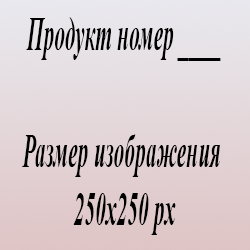
<style>
.page{position:relative;width:250px;height:250px}
.page>*{position:absolute;margin:0}
.t1{font:48.7px "TimesNewRomanPS-BoldItalicMT";color:#000000;scale:0.44 1}
</style>
<div class="page">
<p class="t1" style="left:22px;top:17px;width:199px;height:218px;text-align:center">Продукт номер ____<br><br>Размер изображения <br>250х250 px</p>
</div>
